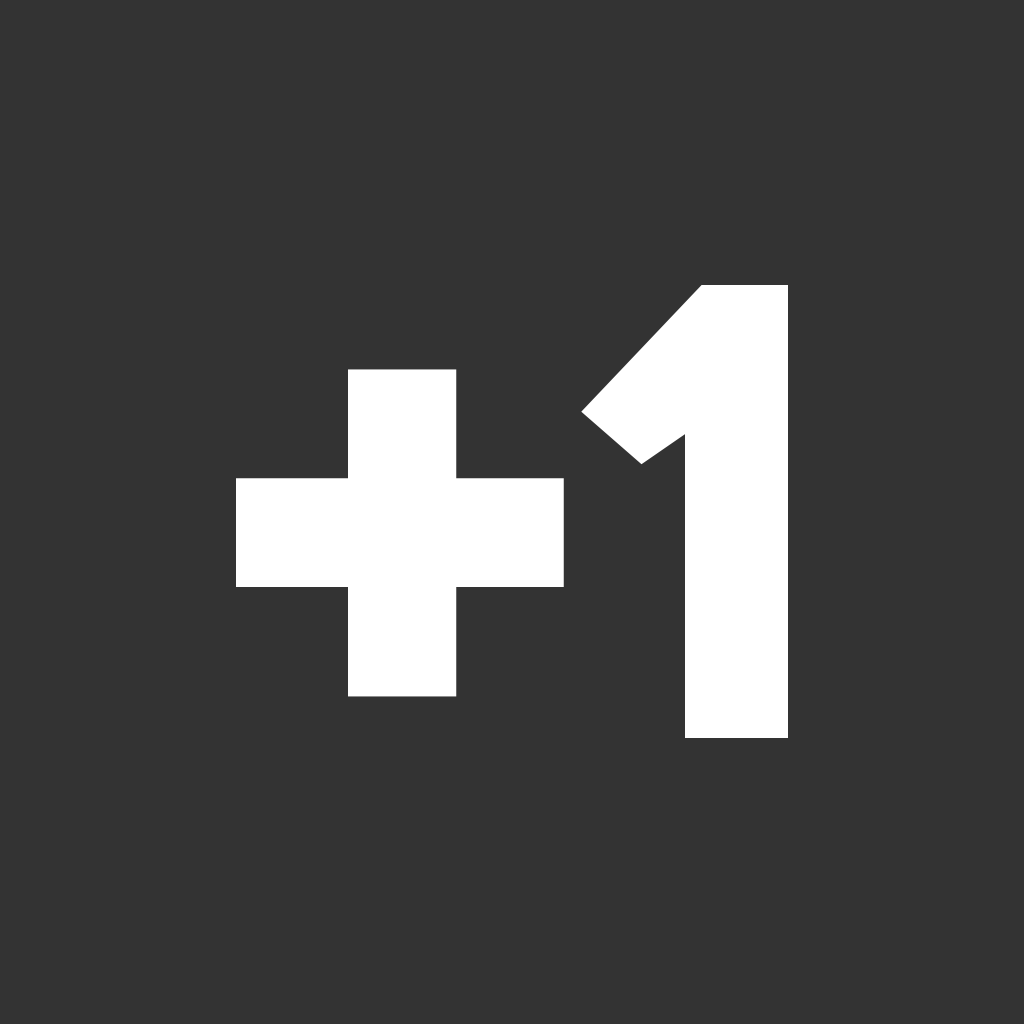
<style>
.page{position:relative;width:1024px;height:1024px;background:#333333}
.page>*{position:absolute;margin:0}
.t1{font:640px "UniSansHeavyCAPS";color:#ffffff}
</style>
<div class="page">
<p class="t1" style="left:236px;top:285px;width:552px;height:453px">+1</p>
</div>
